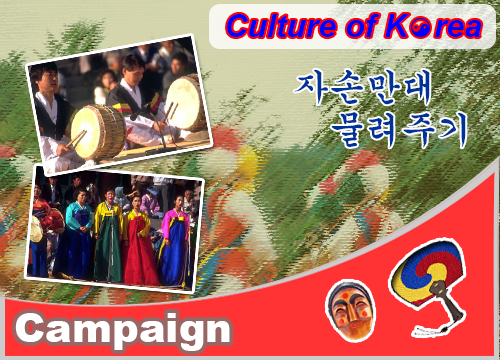
<style>
.page{position:relative;width:500px;height:360px}
.page>*{position:absolute;margin:0}
.t1{font:31.6px "Arial-BoldItalicMT";color:#0000ff}
.t2{font:36px "Gungsuh";color:#003399}
.t3{font:40px "Arial-Black";color:#ffffff}
</style>
<div class="page">
<p class="t1" style="left:227px;top:14px;width:255px;height:23px">Culture of K   rea</p>
<p class="t2" style="left:294px;top:69px;width:172px;height:79px">자손만대<br>   물려주기</p>
<p class="t3" style="left:15px;top:313px;width:215px;height:38px">Campaign</p>
</div>
